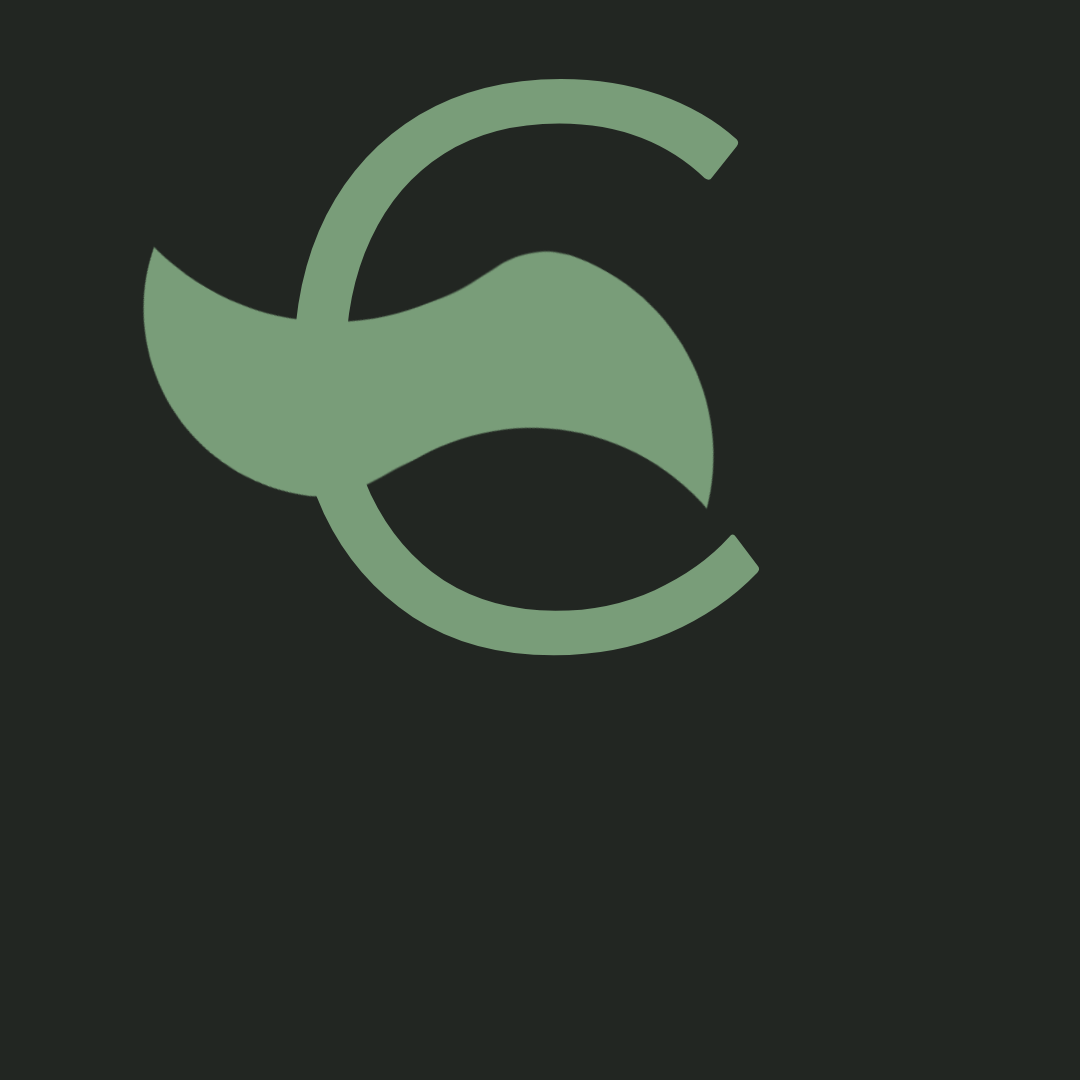
<style>
.page{position:relative;width:1080px;height:1080px;background:#222622}
.page>*{position:absolute;margin:0}
.t1{font:795px "GowunDodum-Regular";color:#799d79}
</style>
<div class="page">
<p class="t1" style="left:293px;top:78px;width:468px;height:578px">C</p>
</div>
